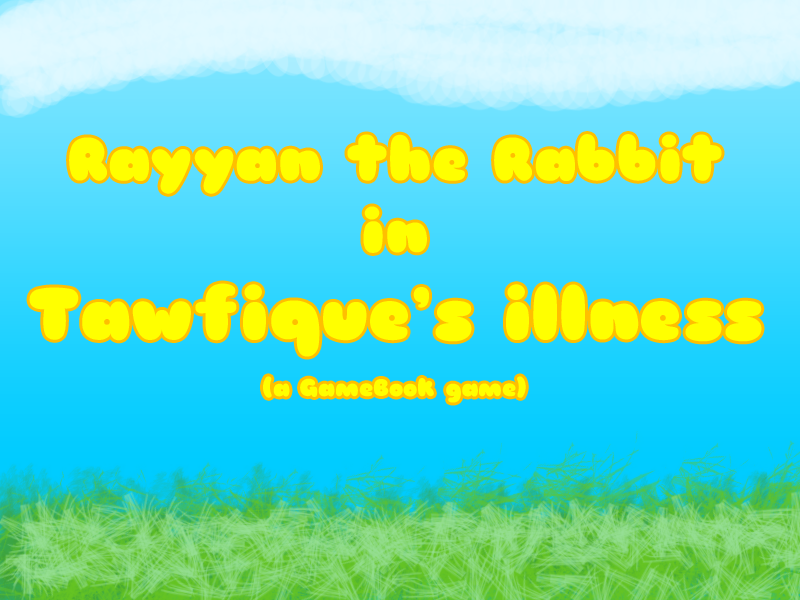
<style>
.page{position:relative;width:800px;height:600px}
.page>*{position:absolute;margin:0}
.t1{font:60px "Sniglet-Regular";color:#ffff00}
.t2{font:72px "Sniglet-Regular";color:#ffff00}
.t3{font:24px "Sniglet-Regular";color:#ffff00}
</style>
<div class="page">
<p class="t1" style="left:29px;top:134px;width:733px;height:269px;text-align:center">Rayyan the Rabbit<br>in<br><span class="t2">Tawfique’s illness<br></span><span class="t3"><br>(a GameBook game)</span></p>
</div>
